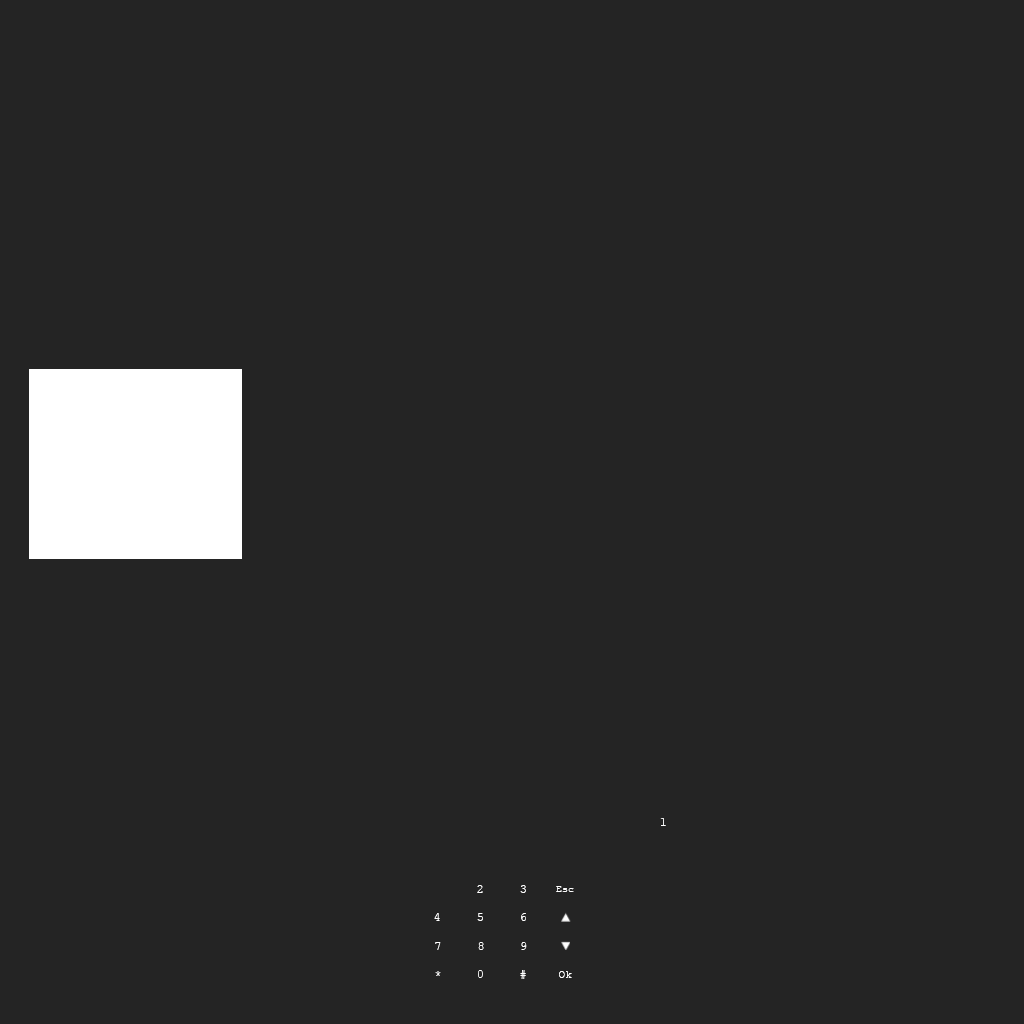
<style>
.page{position:relative;width:1024px;height:1024px;background:#242424}
.page>*{position:absolute;margin:0}
.t1{font:12px "CourierNewPSMT";color:#ffffff}
.t2{font:10px "CourierNewPSMT";color:#ffffff}
.t3{font:11px "CourierNewPSMT";color:#ffffff}
</style>
<div class="page">
<p class="t1" style="left:660px;top:818px;width:6px;height:8px">1</p>
<p class="t1" style="left:477px;top:885px;width:6px;height:8px">2</p>
<p class="t1" style="left:520px;top:885px;width:6px;height:8px">3</p>
<p class="t2" style="left:556px;top:886px;width:18px;height:6px">Esc</p>
<p class="t1" style="left:434px;top:913px;width:6px;height:8px">4</p>
<p class="t1" style="left:477px;top:913px;width:6px;height:8px">5</p>
<p class="t1" style="left:521px;top:913px;width:5px;height:8px">6</p>
<p class="t1" style="left:435px;top:942px;width:6px;height:8px">7</p>
<p class="t1" style="left:478px;top:942px;width:6px;height:8px">8</p>
<p class="t1" style="left:521px;top:942px;width:6px;height:8px">9</p>
<p class="t1" style="left:435px;top:971px;width:6px;height:5px">*</p>
<p class="t1" style="left:478px;top:970px;width:5px;height:8px">0</p>
<p class="t1" style="left:520px;top:970px;width:6px;height:9px">#</p>
<p class="t3" style="left:559px;top:971px;width:13px;height:7px">Ok</p>
</div>
